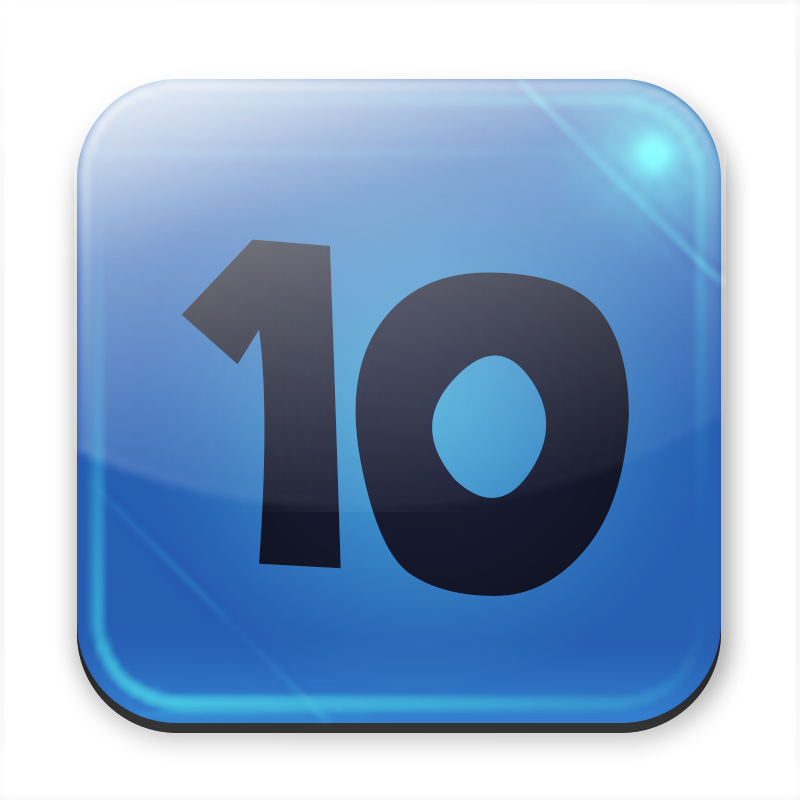
<style>
.page{position:relative;width:800px;height:800px;background:#ffffff}
.page>*{position:absolute;margin:0}
.t1{font:550px "Brady-Bunch"}
</style>
<div class="page">
<p class="t1" style="left:181px;top:239px;width:448px;height:357px">10</p>
</div>
